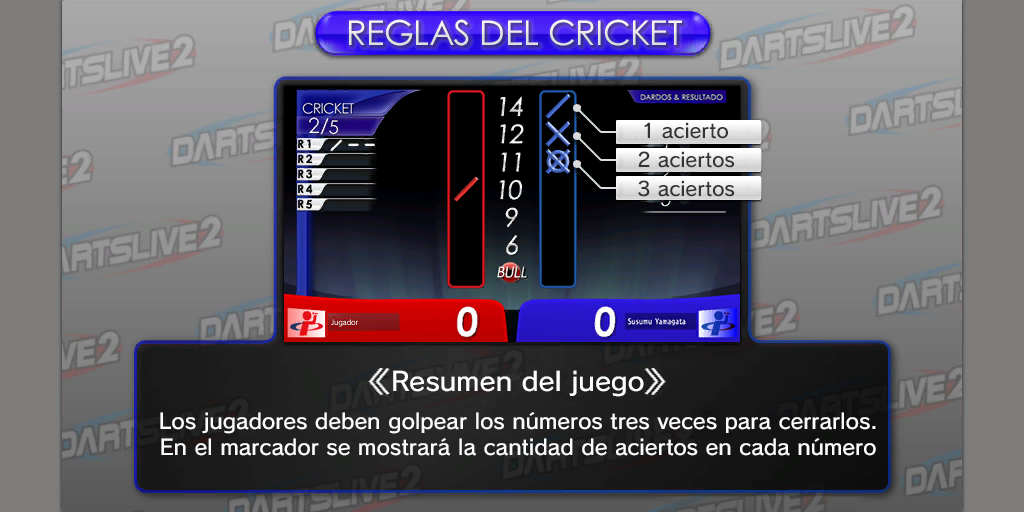
<style>
.page{position:relative;width:1024px;height:512px}
.page>*{position:absolute;margin:0}
.t1{font:34.1px "CenturyGothicPaneuropean";color:#eae9e6}
.t2{font:19.5px "SCEPS3RodinLATIN-Regular";color:#313531}
.t3{font:25.9px "SCEPS3RodinLATIN-Regular";color:#fdfdfd;scale:1.04 1}
.t4{font:21px "SCEPS3RodinLATIN-Regular";color:#fdfdfd}
</style>
<div class="page">
<p class="t1" style="left:349px;top:19px;width:333px;height:27px">REGLAS DEL CRICKET</p>
<p class="t2" style="left:644px;top:122px;width:84px;height:17px">1 acierto</p>
<p class="t2" style="left:638px;top:151px;width:97px;height:17px">2 aciertos</p>
<p class="t2" style="left:638px;top:180px;width:97px;height:17px">3 aciertos</p>
<p class="t3" style="left:393px;top:370px;width:251px;height:27px">Resumen del juego</p>
<p class="t4" style="left:160px;top:412px;width:716px;height:44px;text-align:center">Los jugadores deben golpear los números tres veces para cerrarlos.<br>En el marcador se mostrará la cantidad de aciertos en cada número</p>
</div>
